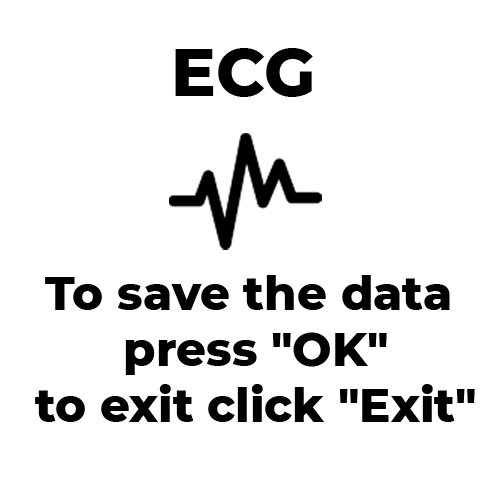
<style>
.page{position:relative;width:500px;height:500px;background:#ffffff}
.page>*{position:absolute;margin:0}
.t1{font:66.7px "Montserrat-ExtraBold";color:#000000}
.t2{font:46.7px "Montserrat-ExtraBold";color:#000000}
</style>
<div class="page">
<p class="t1" style="left:175px;top:48px;width:138px;height:49px">ECG</p>
<p class="t2" style="left:35px;top:275px;width:440px;height:147px;text-align:center">To save the data<br> press "OK"<br> to exit click "Exit"</p>
</div>
